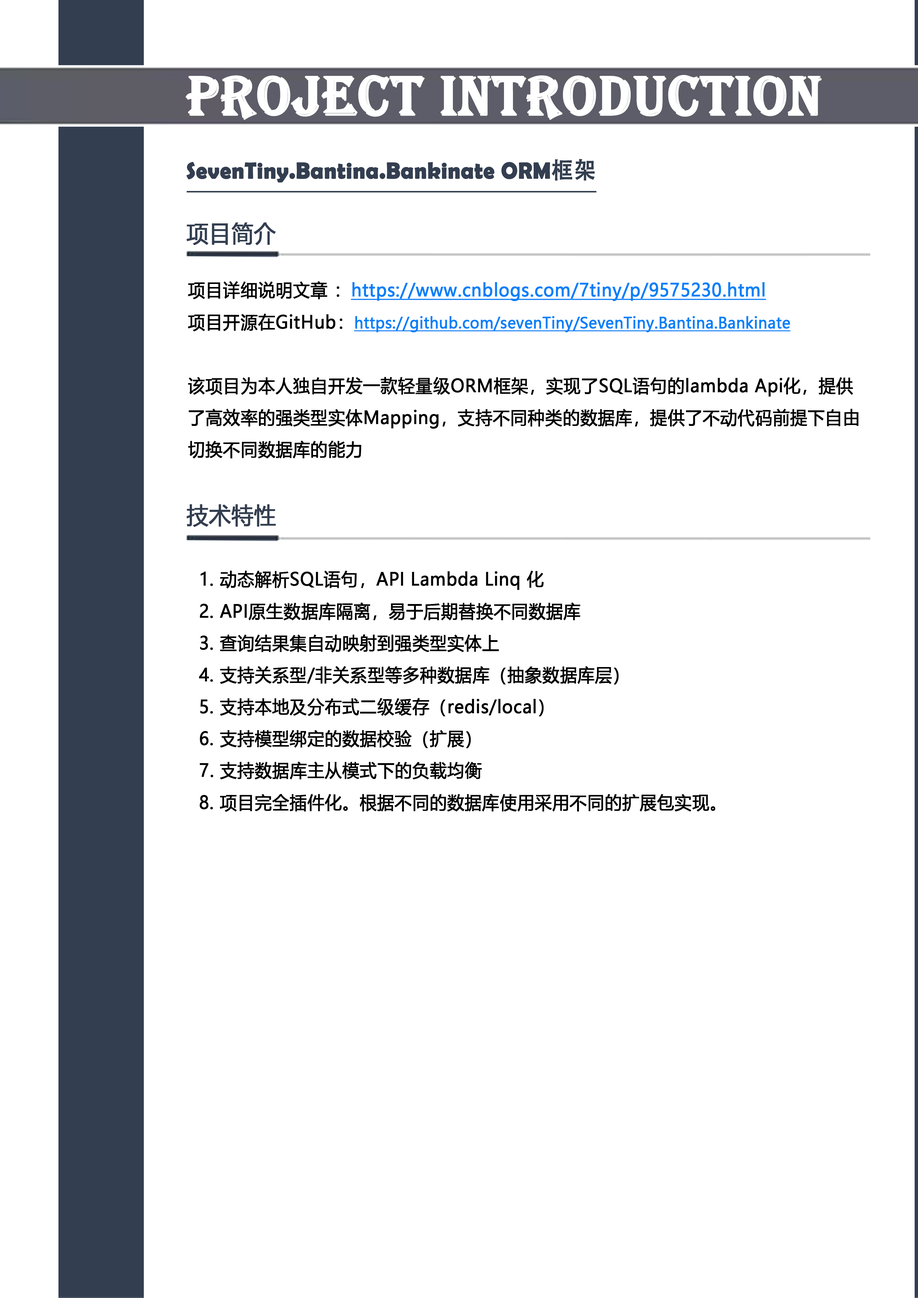
<style>
.page{position:relative;width:918px;height:1298px;background:#ffffff}
.page>*{position:absolute;margin:0}
.t1{font:57.4px "Algerian";letter-spacing:0.005em;color:#ffffff;font-weight:bold;scale:0.95 1}
.t2{font:23px "BerlinSansFBDemi-Bold";letter-spacing:0.005em;color:#333e50;font-weight:bold;scale:0.95 1}
.t3{font:23px "AdobeHeitiStd-Regular";letter-spacing:0.005em;color:#333e50;font-weight:bold;scale:0.95 1}
.t4{font:23px "MicrosoftYaHei";letter-spacing:0.005em;color:#333e50;font-weight:bold;scale:0.95 1}
.t5{font:17.9px/31.9px "MicrosoftYaHei";letter-spacing:0.005em;color:#000000;font-weight:bold;scale:0.95 1}
.t6{font:17.9px/31.9px "MicrosoftYaHei";letter-spacing:0.005em;color:#087ff9;font-weight:bold;text-decoration:underline;scale:0.95 1}
.t7{font:15.3px/28.1px "MicrosoftYaHei";letter-spacing:0.005em;color:#087ff9;font-weight:bold;text-decoration:underline;scale:0.95 1}
</style>
<div class="page">
<p class="t1" style="left:185px;top:75px;width:637px;height:45px">PROJECT INTRODUCTION</p>
<p class="t2" style="left:186px;top:159px;width:409px;height:24px">SevenTiny.Bantina.Bankinate ORM<span class="t3">框架</span></p>
<p class="t4" style="left:186px;top:223px;width:90px;height:22px">项目简介</p>
<p class="t5" style="left:188px;top:281px;width:671px;height:178px">项目详细说明文章 ：<span class="t6">https://www.cnblogs.com/7tiny/p/9575230.html<br></span>项目开源在GitHub：<span class="t7">https://github.com/sevenTiny/SevenTiny.Bantina.Bankinate</span>   <br><br>该项目为本人独自开发一款轻量级ORM框架，实现了SQL语句的lambda Api化，提供了高效率的强类型实体Mapping，支持不同种类的数据库，提供了不动代码前提下自由切换不同数据库的能力</p>
<p class="t4" style="left:186px;top:504px;width:90px;height:23px">技术特性</p>
<p class="t5" style="left:199px;top:571px;width:517px;height:241px">1. 动态解析SQL语句，API Lambda Linq 化<br> 2. API原生数据库隔离，易于后期替换不同数据库<br> 3. 查询结果集自动映射到强类型实体上<br> 4. 支持关系型/非关系型等多种数据库（抽象数据库层）<br> 5. 支持本地及分布式二级缓存（redis/local）<br> 6. 支持模型绑定的数据校验（扩展）<br>  7. 支持数据库主从模式下的负载均衡<br> 8. 项目完全插件化。根据不同的数据库使用采用不同的扩展包实现。</p>
</div>
